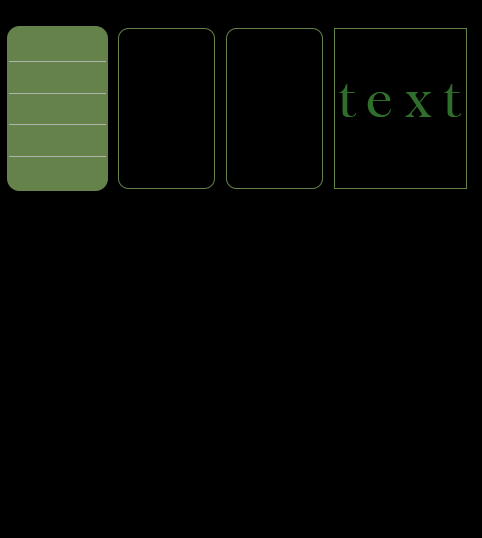
<style>
.page{position:relative;width:482px;height:538px;background:#000000}
.page>*{position:absolute;margin:0}
.t1{font:60px "BaskOldFace";letter-spacing:0.2em;color:#2f6e2b}
</style>
<div class="page">
<p class="t1" style="left:339px;top:84px;width:122px;height:33px">text</p>
</div>
